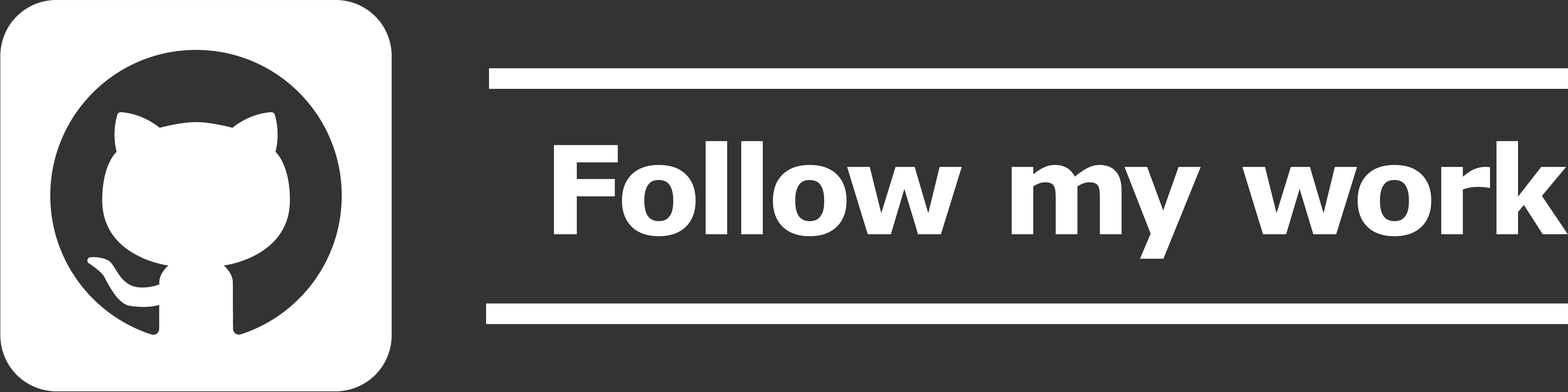
<style>
.page{position:relative;width:1568px;height:392px;background:#333333}
.page>*{position:absolute;margin:0}
.t1{font:122.5px "Verdana-Bold";letter-spacing:-0.02em;color:#ffffff}
</style>
<div class="page">
<p class="t1" style="left:554px;top:141px;width:1014px;height:118px">Follow my work</p>
</div>
